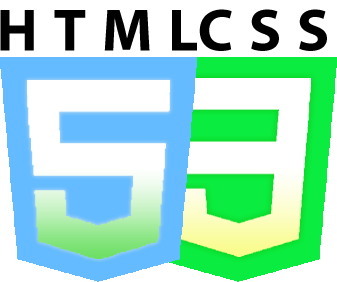
<style>
.page{position:relative;width:337px;height:282px;background:#ffffff}
.page>*{position:absolute;margin:0}
.t1{font:60px "MyriadPro-Bold";letter-spacing:0.26em;color:#000000}
</style>
<div class="page">
<p class="t1" style="left:0px;top:10px;width:197px;height:41px">HTML</p>
<p class="t1" style="left:199px;top:9px;width:128px;height:42px">CSS</p>
</div>
